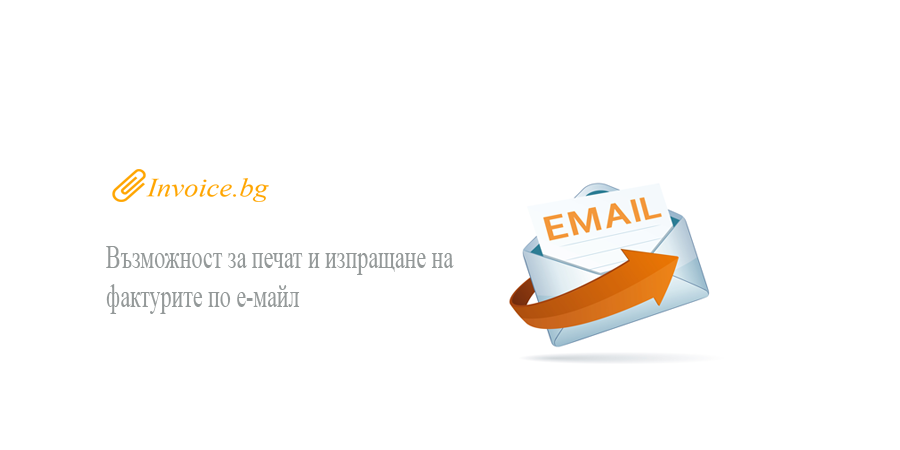
<style>
.page{position:relative;width:900px;height:450px;background:#ffffff}
.page>*{position:absolute;margin:0}
.t1{font:32.5px "TimesNewRomanPSMT";color:#949999;scale:0.67 1}
</style>
<div class="page">
<p class="t1" style="left:106px;top:246px;width:348px;height:68px;text-align:right">Възможност за печат и изпращане на<br>фактурите по е-майл</p>
</div>
